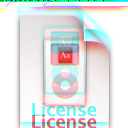
<style>
.page{position:relative;width:128px;height:128px}
.page>*{position:absolute;margin:0}
.t1{font:18px "LucidaGrande-Bold";letter-spacing:-0.02em}
</style>
<div class="page">
<p class="t1" style="left:32px;top:100px;width:65px;height:15px">License</p>
</div>
